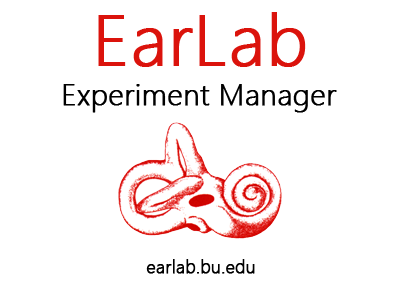
<style>
.page{position:relative;width:400px;height:300px;background:#ffffff}
.page>*{position:absolute;margin:0}
.t1{font:72px "SegoeUI-Light";color:#db130c;font-weight:bold}
.t2{font:30px "SegoeUI-Light";color:#000000;font-weight:bold}
.t3{font:18px "SegoeUI-Light";color:#000000;font-weight:bold}
</style>
<div class="page">
<p class="t1" style="left:98px;top:12px;width:208px;height:55px">EarLab</p>
<p class="t2" style="left:63px;top:84px;width:274px;height:29px">Experiment Manager</p>
<p class="t3" style="left:146px;top:259px;width:109px;height:15px">earlab.bu.edu</p>
</div>
